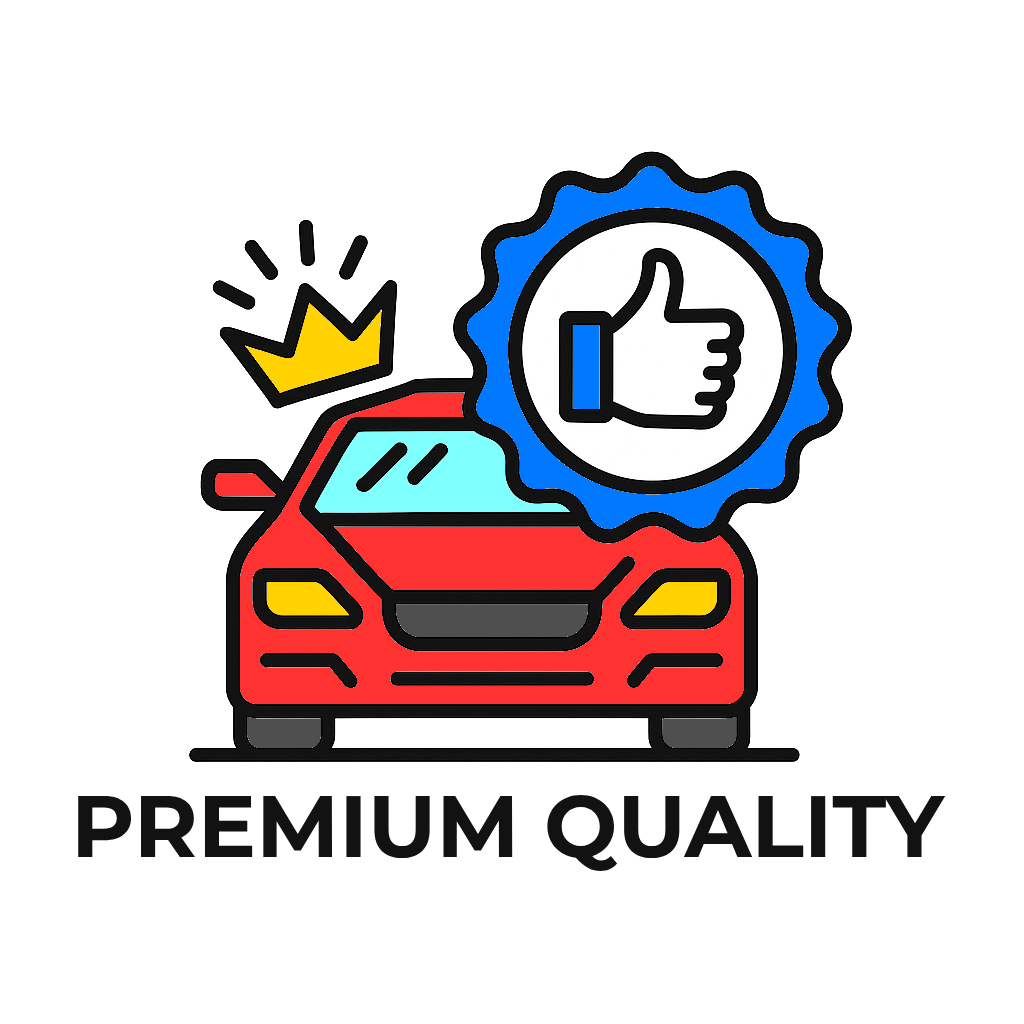
<style>
.page{position:relative;width:1024px;height:1024px;background:#ffffff}
.page>*{position:absolute;margin:0}
.t1{font:87px "Montserrat-Bold";color:#121212}
</style>
<div class="page">
<p class="t1" style="left:78px;top:795px;width:868px;height:77px">PREMIUM QUALITY</p>
</div>
